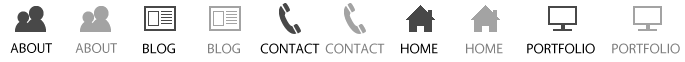
<style>
.page{position:relative;width:685px;height:62px;background:#ffffff}
.page>*{position:absolute;margin:0}
.t1{font:14px "Vegur-Regular";color:#000000;text-transform:uppercase}
</style>
<div class="page">
<p class="t1" style="left:10px;top:43px;width:42px;height:10px">About</p>
<p class="t1" style="left:143px;top:43px;width:32px;height:11px">BLOG</p>
<p class="t1" style="left:260px;top:43px;width:60px;height:11px">CONTACT</p>
<p class="t1" style="left:401px;top:43px;width:37px;height:11px">Home</p>
<p class="t1" style="left:527px;top:43px;width:68px;height:11px">Portfolio</p>
</div>
